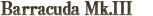
<style>
.page{position:relative;width:153px;height:16px;background:#ffffff}
.page>*{position:absolute;margin:0}
.t1{font:18px "RyuminPro-ExBold";letter-spacing:-0.06em;color:#4a3f32;font-weight:bold;scale:0.9 1}
</style>
<div class="page">
<p class="t1" style="left:1px;top:1px;width:132px;height:15px">Barracuda Mk.III</p>
</div>
